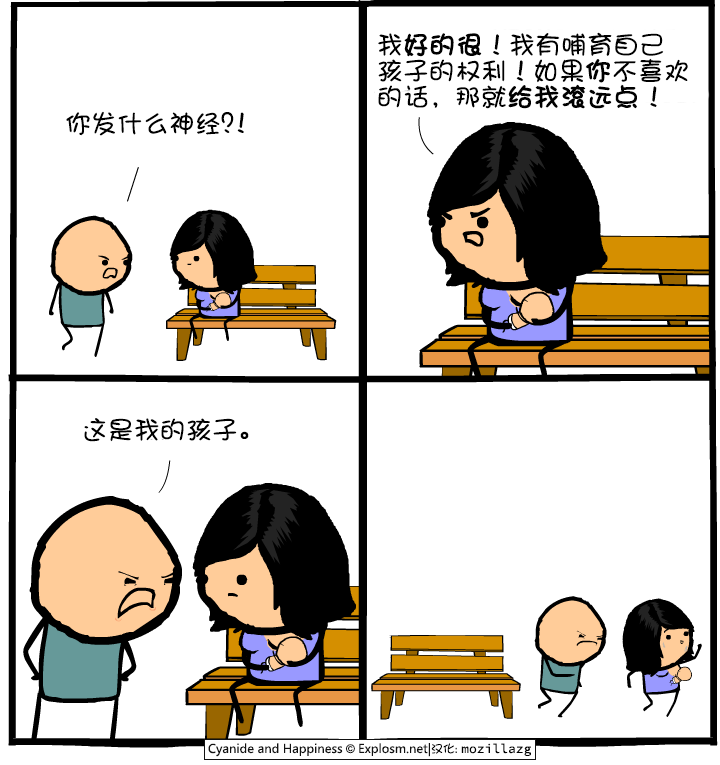
<style>
.page{position:relative;width:720px;height:765px;background:#ffffff}
.page>*{position:absolute;margin:0}
.t1{font:26px/26px "DFShaoNvW5";color:#000000}
.t2{font:26px/26px "DFShaoNvW5";color:#000000;font-weight:bold}
.t3{font:26px "DFShaoNvW5";color:#000000}
</style>
<div class="page">
<p class="t1" style="left:378px;top:32px;width:310px;height:77px">我<span class="t2">好的很</span>！我有哺育自己<br>孩子的权利！如果<span class="t2">你</span>不喜欢<br>的话，那就<span class="t2">给我滚远点</span>！</p>
<p class="t3" style="left:66px;top:111px;width:178px;height:25px">你发什么神经?!</p>
<p class="t3" style="left:84px;top:418px;width:165px;height:24px">这是我的孩子。</p>
</div>
